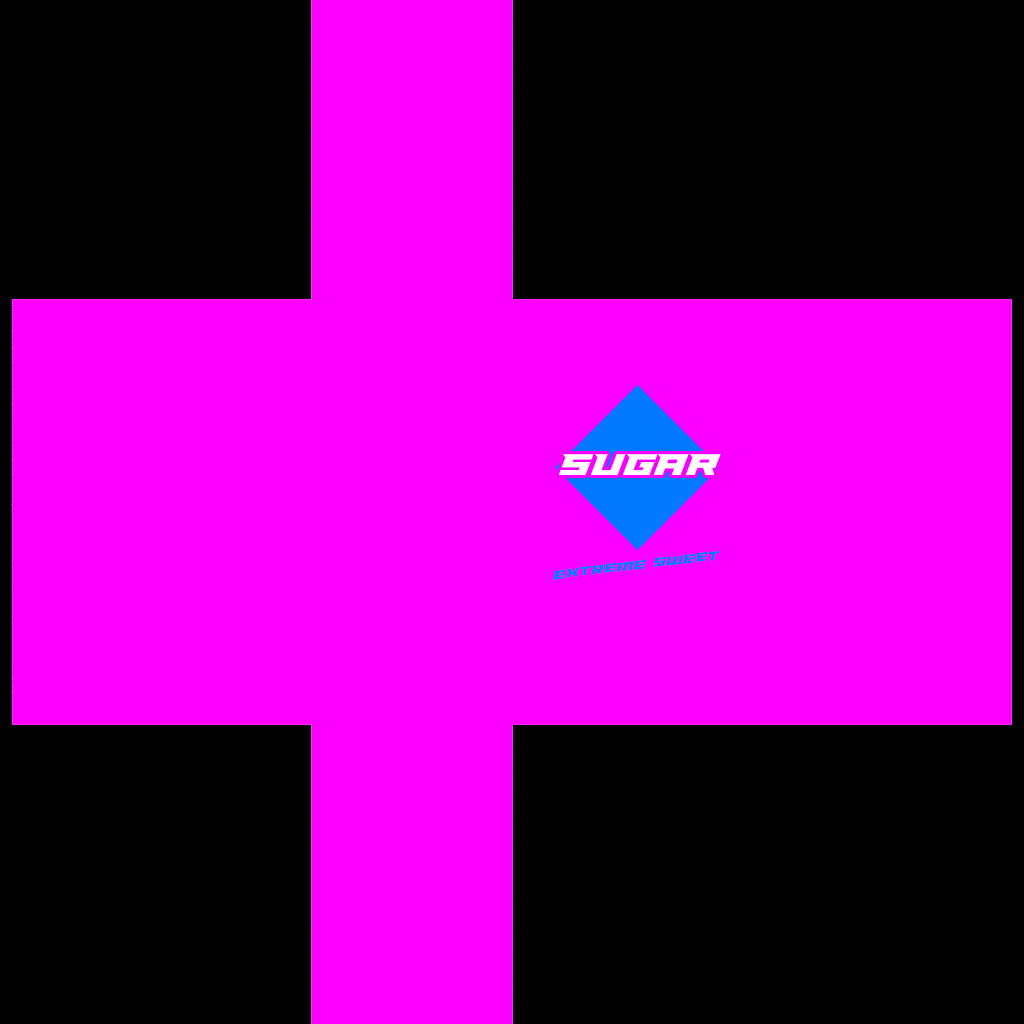
<style>
.page{position:relative;width:1024px;height:1024px;background:#fc00ff}
.page>*{position:absolute;margin:0}
.t1{font:32px "Paladins";color:#ffffff}
.t2{font:13px "Paladins";color:#0078ff}
</style>
<div class="page">
<p class="t1" style="left:559px;top:454px;width:162px;height:21px">Sugar</p>
<p class="t2" style="left:553px;top:550px;width:167px;height:30px;rotate:-7deg">EXTREME Sweet</p>
</div>
